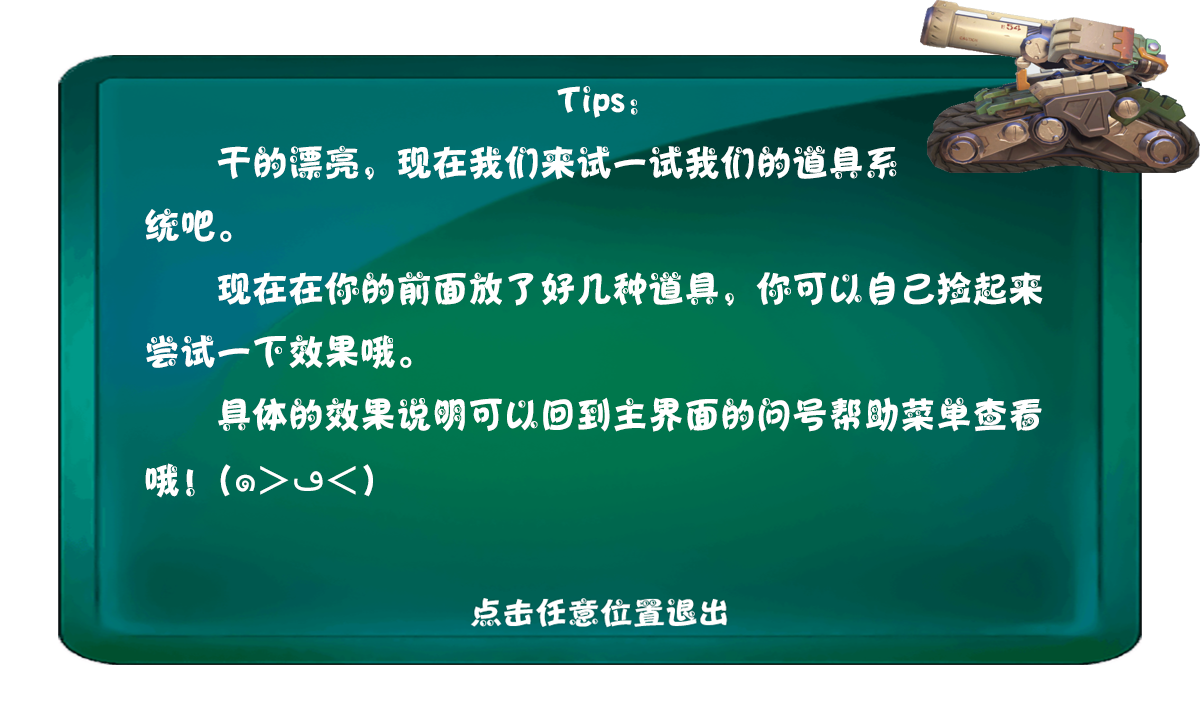
<style>
.page{position:relative;width:1200px;height:720px;background:#ffffff}
.page>*{position:absolute;margin:0}
.t1{font:36px "Jtaiji";color:#ffffff}
.t2{font:36px "Tahoma";color:#ffffff}
</style>
<div class="page">
<p class="t1" style="left:145px;top:86px;width:898px;height:412px;text-align:center">Tips:<br>       干的漂亮，现在我们来试一试我们的道具系<br>    统吧。<br>      现在在你的前面放了好几种道具，你可以自己捡起来<br>    尝试一下效果哦。<br>      具体的效果说明可以回到主界面的问号帮助菜单查看<br>    哦！(<span class="t2">๑</span>＞<span class="t2">ڡ</span>＜)</p>
</div>
